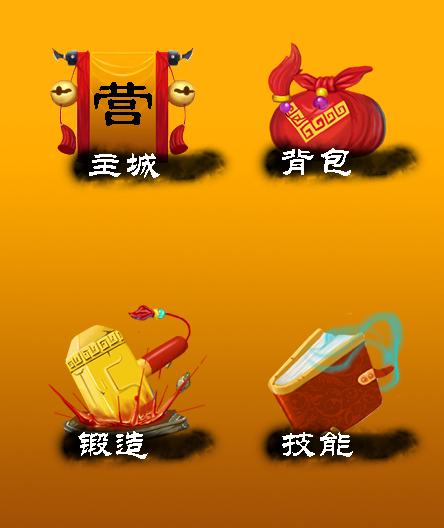
<style>
.page{position:relative;width:444px;height:528px}
.page>*{position:absolute;margin:0}
.t1{font:69.6px "LiSu";color:#000000}
.t2{font:37.4px "STLiti";color:#ffffff}
</style>
<div class="page">
<p class="t1" style="left:94px;top:82px;width:58px;height:44px">营</p>
<p class="t2" style="left:282px;top:148px;width:69px;height:28px">背包</p>
<p class="t2" style="left:89px;top:153px;width:71px;height:25px">主城</p>
<p class="t2" style="left:78px;top:431px;width:70px;height:28px">锻造</p>
<p class="t2" style="left:282px;top:432px;width:71px;height:25px">技能</p>
</div>
